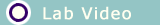
<style>
.page{position:relative;width:160px;height:25px;background:#94c5c5}
.page>*{position:absolute;margin:0}
.t1{font:16px "Verdana";letter-spacing:0.055em;color:#fffff0;font-weight:bold}
</style>
<div class="page">
<p class="t1" style="left:43px;top:6px;width:88px;height:14px">Lab Video</p>
</div>
